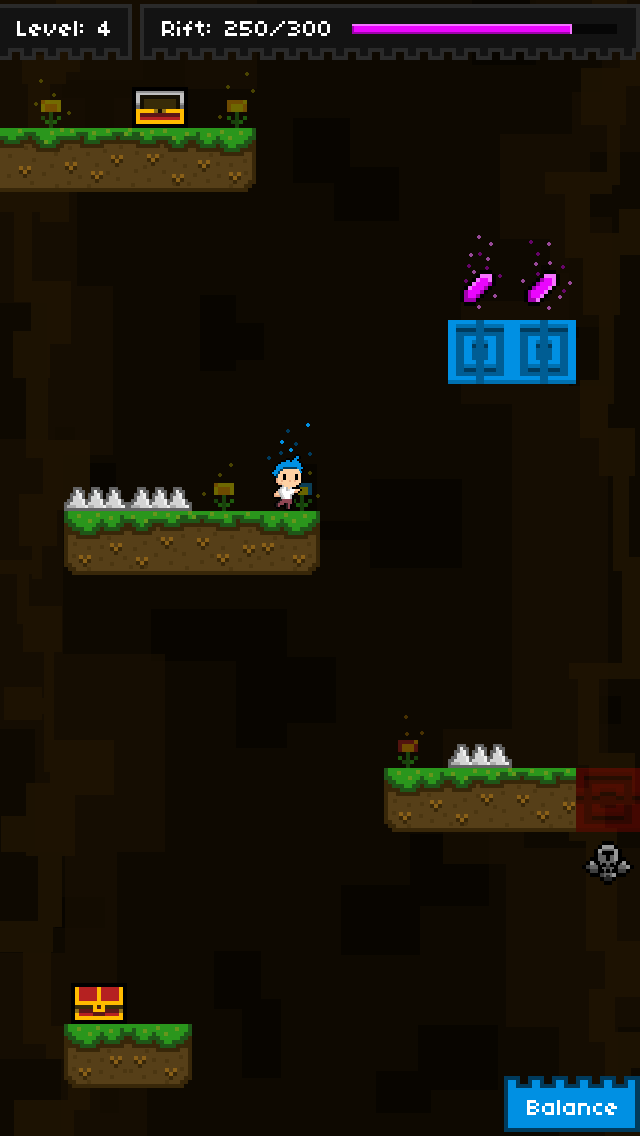
<style>
.page{position:relative;width:640px;height:1136px;background:#0e0901}
.page>*{position:absolute;margin:0}
.t1{font:24px "04b03";color:#ffffff}
</style>
<div class="page">
<p class="t1" style="left:17px;top:21px;width:93px;height:15px">Level: 4</p>
<p class="t1" style="left:162px;top:21px;width:168px;height:15px">Rift: 250/300</p>
<p class="t1" style="left:527px;top:1100px;width:90px;height:15px">Balance</p>
</div>
